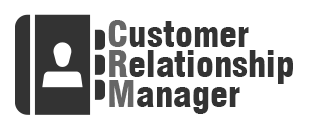
<style>
.page{position:relative;width:331px;height:126px;background:#ffffff}
.page>*{position:absolute;margin:0}
.t1{font:36px/30px "Swiss721BT-BlackCondensed";color:#333333}
.t2{font:36px/30px "Swiss721BT-BlackCondensed";color:#666666}
</style>
<div class="page">
<p class="t1" style="left:108px;top:20px;width:185px;height:94px"><span class="t2">C</span>ustomer<br><span class="t2">R</span>elationship<br><span class="t2">M</span>anager</p>
</div>
